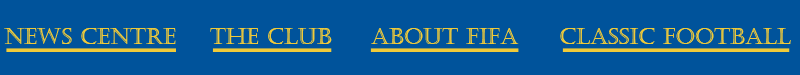
<style>
.page{position:relative;width:800px;height:75px;background:#00539b}
.page>*{position:absolute;margin:0}
.t1{font:22.2px "Castellar";color:#f0ca39}
</style>
<div class="page">
<p class="t1" style="left:4px;top:28px;width:172px;height:16px">NEWS CENTRE</p>
<p class="t1" style="left:210px;top:28px;width:122px;height:16px">THE CLUB</p>
<p class="t1" style="left:371px;top:28px;width:148px;height:16px">ABOUT FIFA</p>
<p class="t1" style="left:560px;top:28px;width:231px;height:16px">CLASSIC FOOTBALL</p>
</div>
